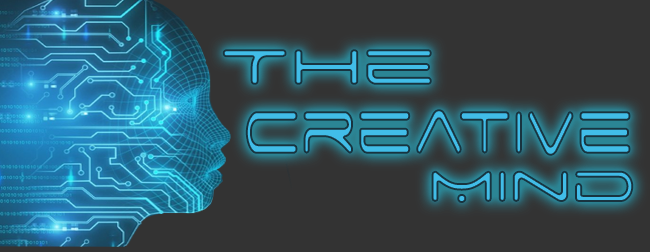
<style>
.page{position:relative;width:650px;height:252px;background:#333333}
.page>*{position:absolute;margin:0}
.t1{font:81.2px "SpaceAge"}
.t2{font:97.2px "SpaceAge";scale:0.65 1}
</style>
<div class="page">
<p class="t1" style="left:222px;top:49px;width:210px;height:36px">The</p>
<p class="t2" style="left:245px;top:109px;width:386px;height:47px">Creative</p>
</div>
